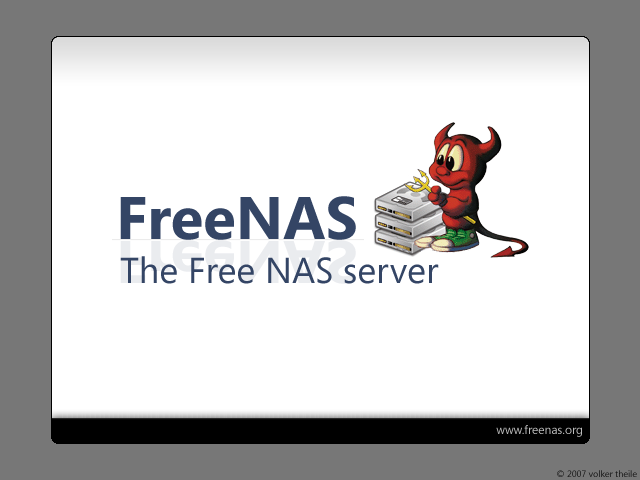
<style>
.page{position:relative;width:640px;height:480px;background:#ffffff}
.page>*{position:absolute;margin:0}
.t1{font:60px "SegoeUI-Bold";color:#344565}
.t2{font:36px "SegoeUI-Regular";color:#344565}
.t3{font:12px "SegoeUI-Regular";color:#bbbbbb}
.t4{font:9px "SegoeUI-Regular";color:#151515}
</style>
<div class="page">
<p class="t1" style="left:120px;top:196px;width:236px;height:44px">FreeNAS</p>
<p class="t2" style="left:120px;top:256px;width:319px;height:28px">The Free NAS server</p>
<p class="t3" style="left:496px;top:425px;width:86px;height:12px">www.freenas.org</p>
<p class="t4" style="left:557px;top:470px;width:80px;height:7px">© 2007 volker theile</p>
</div>
